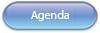
<style>
.page{position:relative;width:100px;height:33px}
.page>*{position:absolute;margin:0}
.t1{font:11.9px "MyriadPro-Regular";color:#ffffff}
</style>
<div class="page">
<p class="t1" style="left:31px;top:10px;width:38px;height:11px">Agenda</p>
</div>
